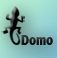
<style>
.page{position:relative;width:57px;height:58px}
.page>*{position:absolute;margin:0}
.t1{font:15.1px "FranklinGothic-Heavy";letter-spacing:0.01em;color:#141313;scale:0.77 1}
</style>
<div class="page">
<p class="t1" style="left:21px;top:35px;width:32px;height:10px">Domo</p>
</div>
